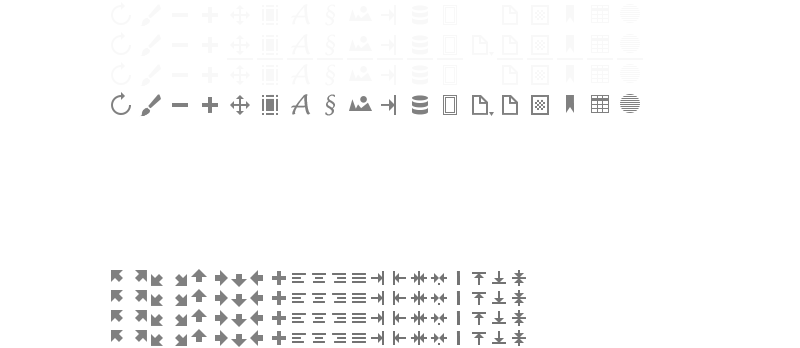
<style>
.page{position:relative;width:800px;height:348px;background:#ffffff}
.page>*{position:absolute;margin:0}
.t1{font:27.1px "LucidaHandwriting-Italic";color:#f8f8f8}
.t2{font:23.7px "LucidaHandwriting-Italic";color:#f8f8f8;scale:0.91 1}
.t3{font:27.1px "LucidaHandwriting-Italic";color:#737373}
.t4{font:23.7px "LucidaHandwriting-Italic";color:#737373;scale:0.91 1}
</style>
<div class="page">
<p class="t1" style="left:291px;top:4px;width:20px;height:21px">A</p>
<p class="t2" style="left:325px;top:4px;width:10px;height:22px">§</p>
<p class="t1" style="left:291px;top:34px;width:20px;height:21px">A</p>
<p class="t2" style="left:325px;top:34px;width:10px;height:22px">§</p>
<p class="t1" style="left:291px;top:64px;width:20px;height:21px">A</p>
<p class="t2" style="left:325px;top:64px;width:10px;height:22px">§</p>
<p class="t3" style="left:291px;top:94px;width:20px;height:21px">A</p>
<p class="t4" style="left:325px;top:94px;width:10px;height:22px">§</p>
</div>
